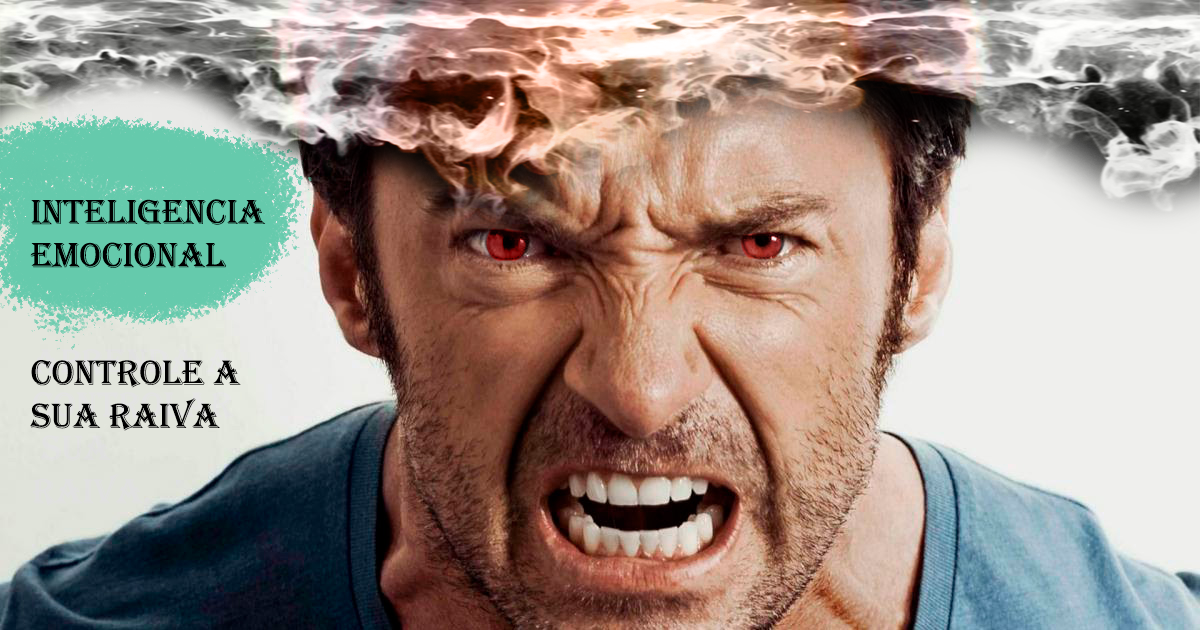
<style>
.page{position:relative;width:1200px;height:630px}
.page>*{position:absolute;margin:0}
.t1{font:36px "Algerian";color:#000000}
</style>
<div class="page">
<p class="t1" style="left:30px;top:199px;width:236px;height:69px">INTELIGENCIA <br>EMOCIONAL</p>
<p class="t1" style="left:30px;top:360px;width:211px;height:71px">controle a <br>sua raiva</p>
</div>
